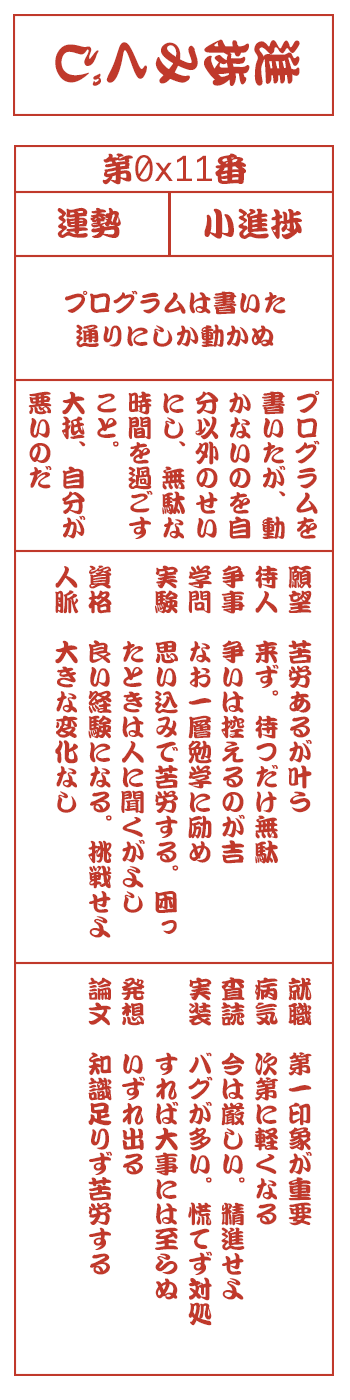
<style>
.page{position:relative;width:350px;height:1400px;background:#ffffff}
.page>*{position:absolute;margin:0}
.t1{font:50px "DFKanTeiRyu-XB-MP-RKSJ-H";color:#c0392b}
.t2{font:33.3px "Monaco";color:#c0392b}
.t3{font:33.3px "DFKanTeiRyu-XB-MP-RKSJ-H";color:#c0392b}
.t4{font:25px/33.3px "DFKanTeiRyu-XB-MP-RKSJ-H";color:#c0392b}
</style>
<div class="page">
<p class="t1" style="left:55px;top:39px;width:245px;height:47px;rotate:90deg">進捗みくじ</p>
<p class="t2" style="left:102px;top:153px;width:144px;height:32px"><span class="t3">第</span>0x11<span class="t3">番</span></p>
<p class="t3" style="left:57px;top:207px;width:64px;height:31px">運勢</p>
<p class="t3" style="left:204px;top:208px;width:98px;height:32px">小進捗</p>
<p class="t4" style="left:65px;top:290px;width:221px;height:58px;text-align:center">プログラムは書いた<br>通りにしか動かぬ</p>
<p class="t4" style="left:28px;top:390px;width:292px;height:149px">プログラムを<br>書いたが、動<br>かないのを自<br>分以外のせい<br>にし、無駄な<br>時間を過ごす<br>こと。<br>大抵、自分が<br>悪いのだ</p>
<p class="t4" style="left:55px;top:565px;width:257px;height:373px">願望　苦労あるが叶う<br>待人　来ず。待つだけ無駄<br>争事　争いは控えるのが吉<br>学問　なお一層勉学に励め<br>実験　思い込みで苦労する。困っ<br>　　　たときは人に聞くがよし<br>資格　良い経験になる。挑戦せよ<br>人脈　大きな変化なし</p>
<p class="t4" style="left:88px;top:977px;width:224px;height:349px">就職　第一印象が重要<br>病気　次第に軽くなる<br>査読　今は厳しい。精進せよ<br>実装　バグが多い。慌てず対処<br>　　　すれば大事には至らぬ<br>発想　いずれ出る<br>論文　知識足りず苦労する</p>
</div>
